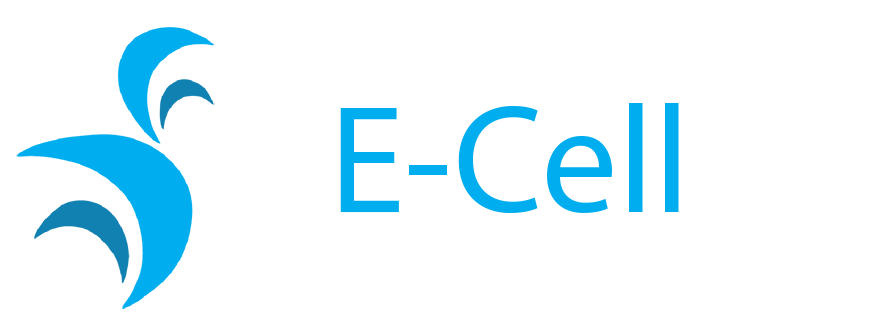
<style>
.page{position:relative;width:884px;height:315px;background:#ffffff}
.page>*{position:absolute;margin:0}
.t1{font:153.7px "MyriadPro-Regular";color:#00aeef}
</style>
<div class="page">
<p class="t1" style="left:340px;top:103px;width:339px;height:111px">E-Cell</p>
</div>
